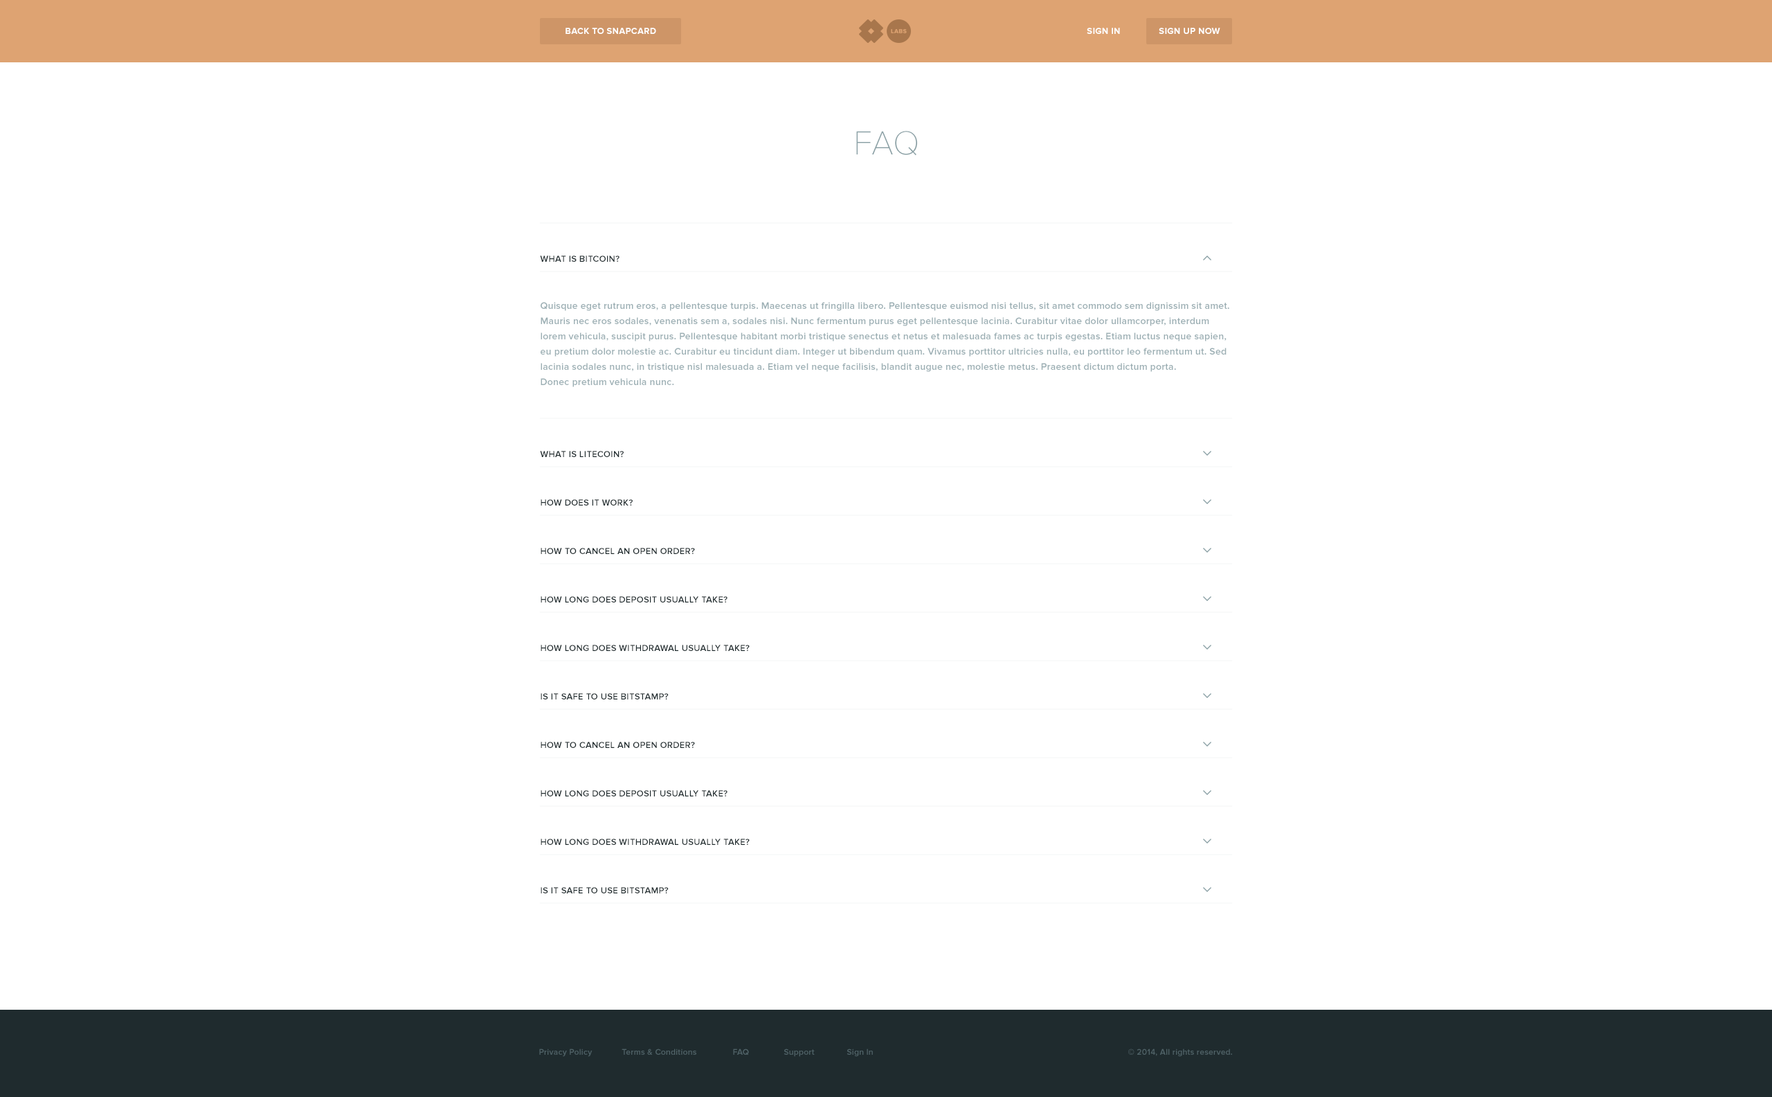
<style>
.page{position:relative;width:1772px;height:1097px;background:#ffffff}
.page>*{position:absolute;margin:0}
.t1{font:9px "ProximaNova-Bold";letter-spacing:0.02em;color:#ffffff;text-transform:uppercase}
.t2{font:34.6px "ProximaNovaT-Thin";letter-spacing:0.02em;color:#899fa4}
.t3{font:9px "ProximaNova-Semibold";letter-spacing:0.02em;color:#1f2b2e}
.t4{font:9.7px/15.2px "ProximaNova-Semibold";letter-spacing:0.02em;color:#9baeb3}
.t5{font:8.3px "ProximaNova-Semibold";letter-spacing:0.02em;color:#506368}
</style>
<div class="page">
<p class="t1" style="left:566px;top:28px;width:90px;height:6px">BACK TO SNAPCARD</p>
<p class="t1" style="left:1087px;top:28px;width:33px;height:6px">Sign in</p>
<p class="t1" style="left:1159px;top:28px;width:62px;height:6px">Sign Up Now</p>
<p class="t2" style="left:856px;top:131px;width:61px;height:25px">FAQ</p>
<p class="t3" style="left:540px;top:255px;width:80px;height:7px">WHAT IS BITCOIN?</p>
<p class="t4" style="left:541px;top:302px;width:689px;height:85px">Quisque eget rutrum eros, a pellentesque turpis. Maecenas ut fringilla libero. Pellentesque euismod nisi tellus, sit amet commodo sem dignissim sit amet. Mauris nec eros sodales, venenatis sem a, sodales nisi. Nunc fermentum purus eget pellentesque lacinia. Curabitur vitae dolor ullamcorper, interdum lorem vehicula, suscipit purus. Pellentesque habitant morbi tristique senectus et netus et malesuada fames ac turpis egestas. Etiam luctus neque sapien, eu pretium dolor molestie ac. Curabitur eu tincidunt diam. Integer ut bibendum quam. Vivamus porttitor ultricies nulla, eu porttitor leo fermentum ut. Sed lacinia sodales nunc, in tristique nisl malesuada a. Etiam vel neque facilisis, blandit augue nec, molestie metus. Praesent dictum dictum porta.<br>Donec pretium vehicula nunc.</p>
<p class="t3" style="left:540px;top:451px;width:84px;height:6px">WHAT IS LITECOIN?</p>
<p class="t3" style="left:541px;top:499px;width:92px;height:6px">HOW DOES IT WORK?</p>
<p class="t3" style="left:541px;top:548px;width:154px;height:6px">HOW TO CANCEL AN OPEN ORDER?</p>
<p class="t3" style="left:541px;top:596px;width:187px;height:6px">HOW LONG DOES DEPOSIT USUALLY TAKE?</p>
<p class="t3" style="left:541px;top:645px;width:209px;height:6px">HOW LONG DOES WITHDRAWAL USUALLY TAKE?</p>
<p class="t3" style="left:541px;top:693px;width:128px;height:6px">IS IT SAFE TO USE BITSTAMP?</p>
<p class="t3" style="left:541px;top:741px;width:154px;height:7px">HOW TO CANCEL AN OPEN ORDER?</p>
<p class="t3" style="left:541px;top:790px;width:187px;height:6px">HOW LONG DOES DEPOSIT USUALLY TAKE?</p>
<p class="t3" style="left:541px;top:838px;width:209px;height:7px">HOW LONG DOES WITHDRAWAL USUALLY TAKE?</p>
<p class="t3" style="left:541px;top:887px;width:128px;height:6px">IS IT SAFE TO USE BITSTAMP?</p>
<p class="t5" style="left:539px;top:1048px;width:54px;height:8px">Privacy Policy</p>
<p class="t5" style="left:622px;top:1048px;width:74px;height:6px">Terms &amp; Conditions</p>
<p class="t5" style="left:733px;top:1048px;width:16px;height:7px">FAQ</p>
<p class="t5" style="left:784px;top:1048px;width:31px;height:8px">Support</p>
<p class="t5" style="left:847px;top:1048px;width:26px;height:8px">Sign In</p>
<p class="t5" style="left:1128px;top:1048px;width:104px;height:8px">© 2014, All rights reserved.</p>
</div>
